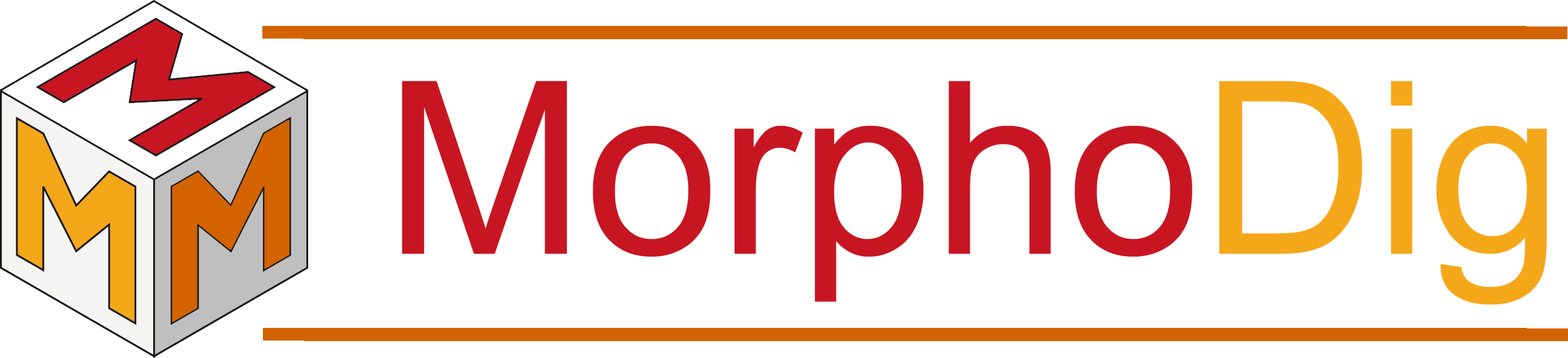
<style>
.page{position:relative;width:1568px;height:358px;background:#ffffff}
.page>*{position:absolute;margin:0}
.t1{font:241.3px "ArialMT";color:#c71622}
.t2{font:241.3px "ArialMT";color:#f5a71a}
</style>
<div class="page">
<p class="t1" style="left:402px;top:81px;width:1145px;height:224px">Morpho<span class="t2">Dig</span></p>
</div>
